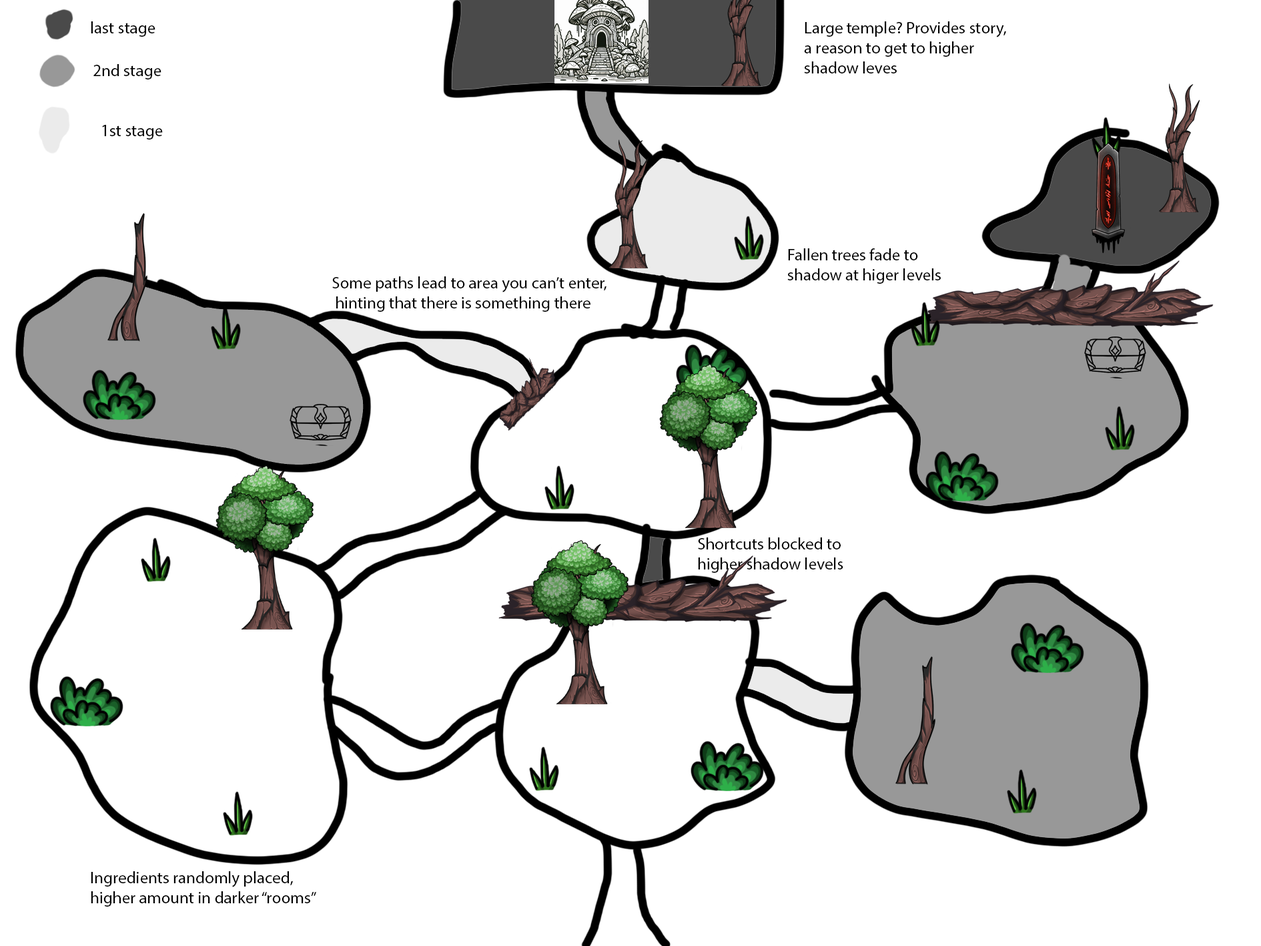
<style>
.page{position:relative;width:1261px;height:946px;background:#ffffff}
.page>*{position:absolute;margin:0}
.t1{font:16.7px "MyriadPro-Regular";color:#000000}
</style>
<div class="page">
<p class="t1" style="left:91px;top:21px;width:64px;height:16px">last stage</p>
<p class="t1" style="left:804px;top:21px;width:202px;height:52px">Large temple? Provides story, a reason to get to higher shadow leves</p>
<p class="t1" style="left:93px;top:64px;width:68px;height:15px">2nd stage</p>
<p class="t1" style="left:102px;top:125px;width:61px;height:14px">1st stage</p>
<p class="t1" style="left:787px;top:248px;width:154px;height:36px">Fallen trees fade to shadow at higer levels</p>
<p class="t1" style="left:332px;top:276px;width:275px;height:36px">Some paths lead to area you can’t enter,<br> hinting that there is something there</p>
<p class="t1" style="left:698px;top:537px;width:145px;height:36px">Shortcuts blocked to higher shadow levels</p>
<p class="t1" style="left:91px;top:871px;width:225px;height:35px">Ingredients randomly placed, higher amount in darker “rooms”</p>
</div>
